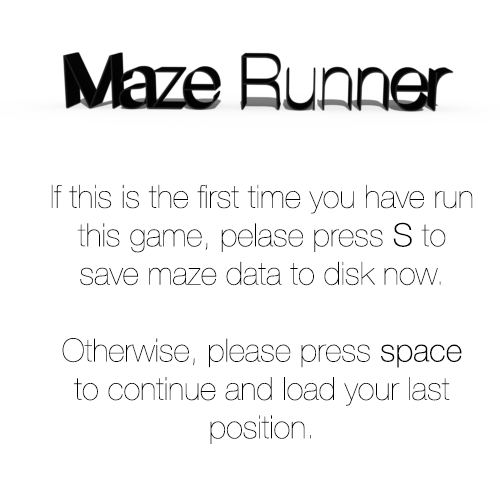
<style>
.page{position:relative;width:500px;height:500px;background:#ffffff}
.page>*{position:absolute;margin:0}
.t1{font:32px "HelveticaNeue-UltraLight";color:#000000}
.t2{font:32px "HelveticaNeue-Thin";color:#000000}
</style>
<div class="page">
<p class="t1" style="left:51px;top:184px;width:422px;height:260px;text-align:center">If this is the first time you have run this game, pelase press <span class="t2">S</span> to save maze data to disk now.<br><br>Otherwise, please press <span class="t2">space </span>to continue and load your last position.</p>
</div>
